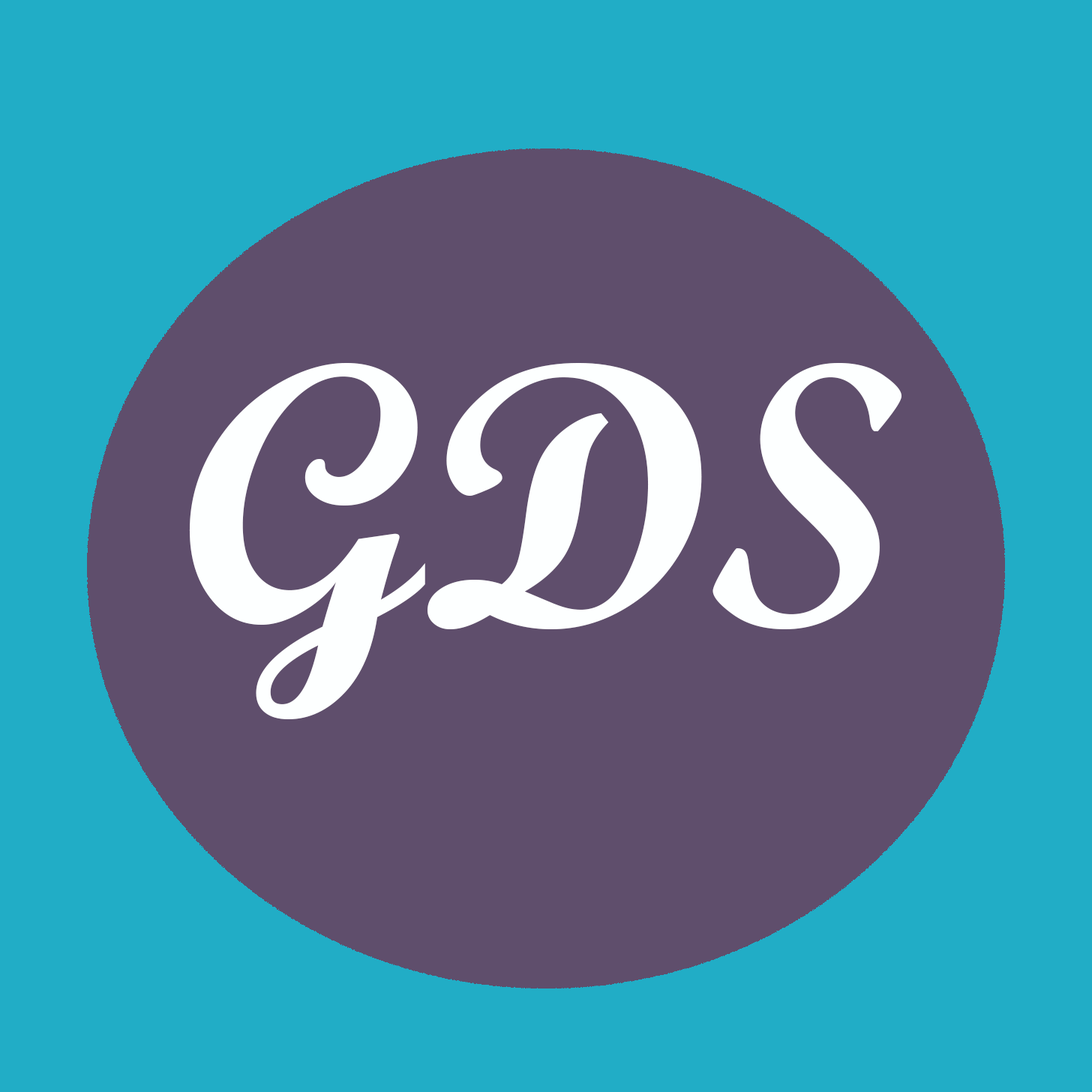
<style>
.page{position:relative;width:1092px;height:1092px;background:#21adc6}
.page>*{position:absolute;margin:0}
.t1{font:375.5px "ScriptMTBold";color:#fdffff}
</style>
<div class="page">
<p class="t1" style="left:189px;top:362px;width:712px;height:357px">GDS</p>
</div>
